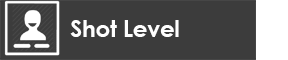
<style>
.page{position:relative;width:288px;height:60px;background:#3c3c3c}
.page>*{position:absolute;margin:0}
.t1{font:22.5px "CenturyGothic-Bold";color:#ffffff}
</style>
<div class="page">
<p class="t1" style="left:70px;top:20px;width:109px;height:17px">Shot Level</p>
</div>
